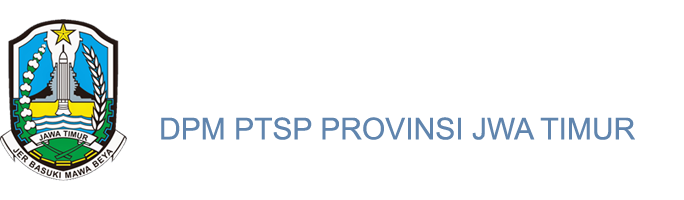
<style>
.page{position:relative;width:684px;height:200px;background:#ffffff}
.page>*{position:absolute;margin:0}
.t1{font:30px "ArialMT";color:#6085ae}
</style>
<div class="page">
<p class="t1" style="left:161px;top:117px;width:474px;height:23px">DPM PTSP PROVINSI JWA TIMUR</p>
</div>
